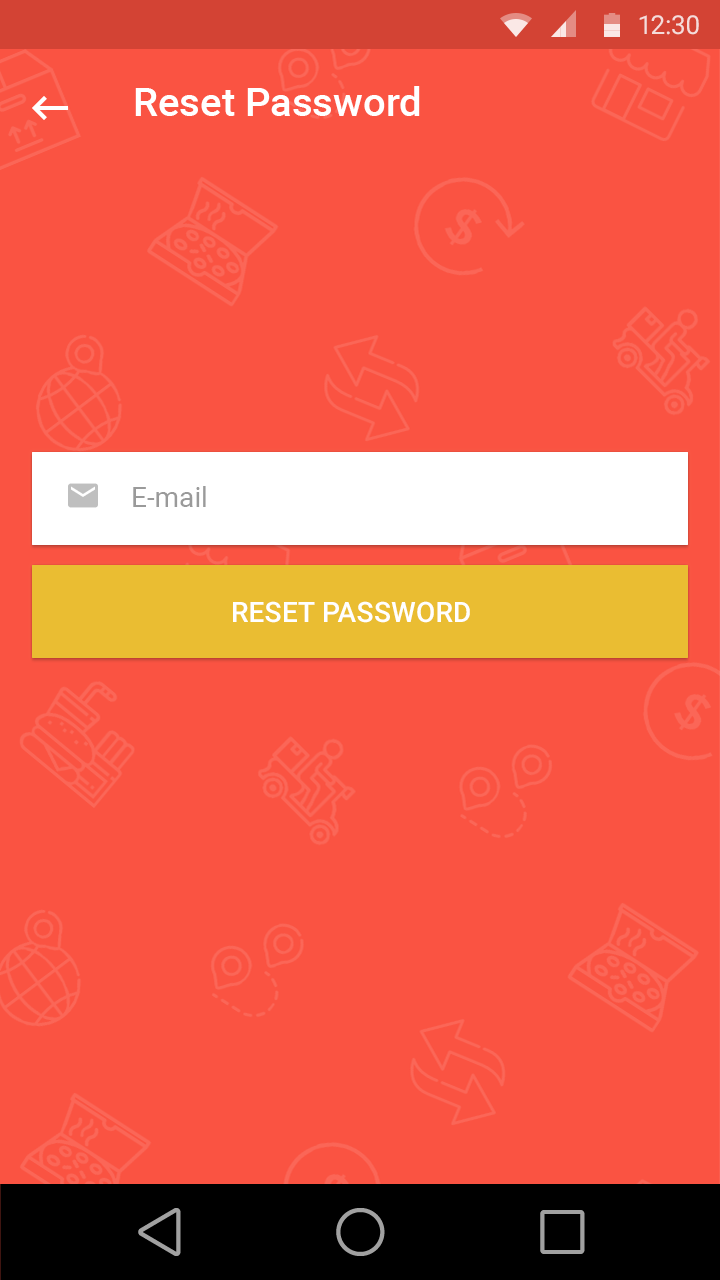
<style>
.page{position:relative;width:720px;height:1280px;background:#fa5342}
.page>*{position:absolute;margin:0}
.t1{font:26px "Roboto-Regular";color:#f5dcda}
.t2{font:40px "Roboto-Medium";color:#ffffff}
.t3{font:28px "Roboto-Regular";color:#9a9a9a}
.t4{font:28px "Roboto-Medium";letter-spacing:0.01em;color:#ffffff;text-transform:uppercase}
</style>
<div class="page">
<p class="t1" style="left:639px;top:15px;width:60px;height:20px">12:30</p>
<p class="t2" style="left:135px;top:86px;width:285px;height:30px">Reset Password</p>
<p class="t3" style="left:133px;top:486px;width:73px;height:21px">E-mail</p>
<p class="t4" style="left:233px;top:601px;width:237px;height:22px">Reset Password</p>
</div>
